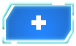
<style>
.page{position:relative;width:76px;height:46px;background:#ffffff}
.page>*{position:absolute;margin:0}
.t1{font:34.7px "Orbitron-Bold";color:#ffffff}
</style>
<div class="page">
<p class="t1" style="left:31px;top:15px;width:15px;height:15px">+</p>
</div>
